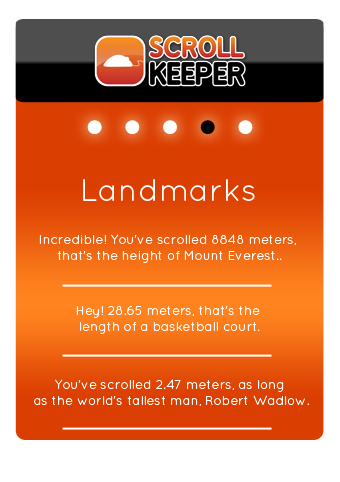
<style>
.page{position:relative;width:340px;height:482px;background:#ffffff}
.page>*{position:absolute;margin:0}
.t1{font:32px "QuicksandBook-Regular";color:#ffffff}
.t2{font:13px "QuicksandBook-Regular";color:#ffffff}
</style>
<div class="page">
<p class="t1" style="left:83px;top:179px;width:172px;height:22px">Landmarks</p>
<p class="t2" style="left:39px;top:234px;width:257px;height:29px;text-align:center">Incredible! You've scrolled 8848 meters, <br>that's the height of Mount Everest..</p>
<p class="t2" style="left:76px;top:306px;width:184px;height:28px;text-align:center">Hey! 28.65 meters, that's the <br>length of a basketball court.</p>
<p class="t2" style="left:34px;top:379px;width:276px;height:27px;text-align:center">You've scrolled 2.47 meters, as long<br> as the world's tallest man, Robert Wadlow.</p>
</div>
